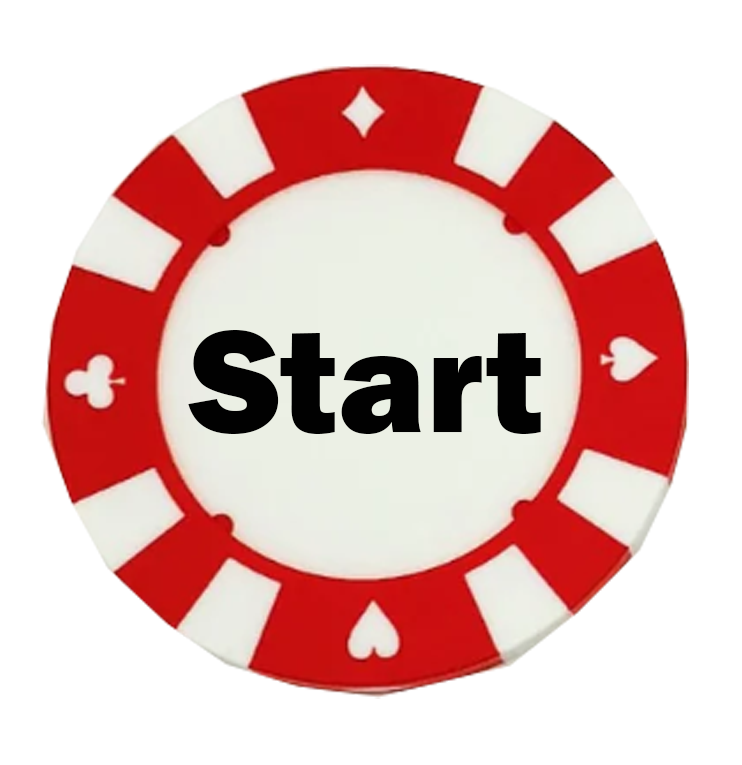
<style>
.page{position:relative;width:742px;height:765px;background:#ffffff}
.page>*{position:absolute;margin:0}
.t1{font:150px "FranklinGothic-Heavy";color:#010101}
</style>
<div class="page">
<p class="t1" style="left:188px;top:330px;width:353px;height:104px">Start</p>
</div>
